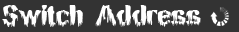
<style>
.page{position:relative;width:239px;height:32px;background:#333333}
.page>*{position:absolute;margin:0}
.t1{font:30px "BNMansonNights";color:#ffffff}
</style>
<div class="page">
<p class="t1" style="left:2px;top:5px;width:199px;height:22px">Switch Address</p>
</div>
